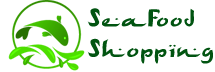
<style>
.page{position:relative;width:215px;height:72px;background:#ffffff}
.page>*{position:absolute;margin:0}
.t1{font:25.3px "ArabDancesMediumItalic";color:#015411;scale:1.47 1}
</style>
<div class="page">
<p class="t1" style="left:87px;top:8px;width:126px;height:56px">SeaFood<br>Shopping</p>
</div>
